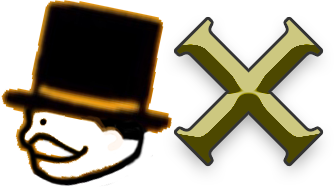
<style>
.page{position:relative;width:334px;height:187px;background:#ffffff}
.page>*{position:absolute;margin:0}
.t1{font:277.8px "CopperplateGothic-Bold"}
</style>
<div class="page">
<p class="t1" style="left:176px;top:19px;width:145px;height:145px">×</p>
</div>
